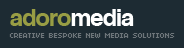
<style>
.page{position:relative;width:184px;height:48px;background:#1d2b33}
.page>*{position:absolute;margin:0}
.t1{font:24px "Coolvetica";color:#989d44}
.t2{font:24px "Coolvetica";color:#ffffff}
.t3{font:8px "04b03";color:#6d757a}
</style>
<div class="page">
<p class="t1" style="left:10px;top:9px;width:124px;height:17px">adoro<span class="t2">media</span></p>
<p class="t3" style="left:9px;top:33px;width:166px;height:5px">CREATIVE BESPOKE NEW MEDIA SOLUTIONS</p>
</div>
